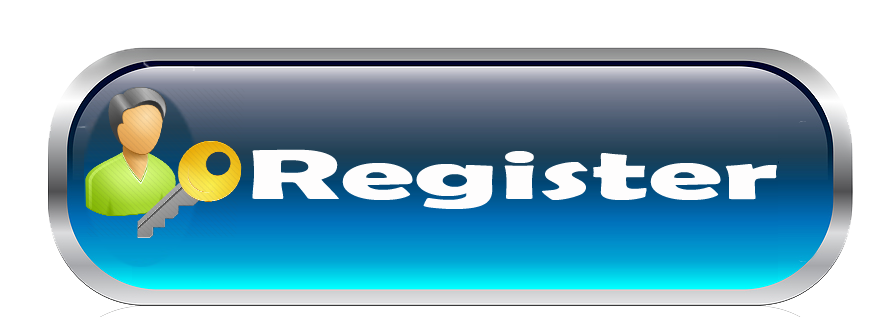
<style>
.page{position:relative;width:888px;height:317px;background:#ffffff}
.page>*{position:absolute;margin:0}
.t1{font:72px "BerlinSansFBDemi-Bold";color:#fefdfd;scale:2.05 1}
</style>
<div class="page">
<p class="t1" style="left:252px;top:149px;width:525px;height:60px">Register</p>
</div>
